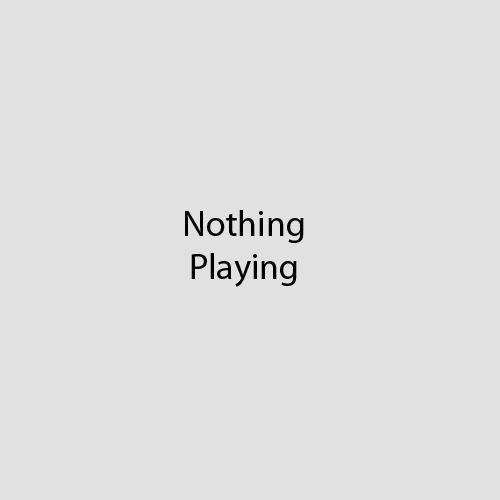
<style>
.page{position:relative;width:500px;height:500px;background:#e1e1e1}
.page>*{position:absolute;margin:0}
.t1{font:36px "MyriadPro-Regular";color:#000000}
</style>
<div class="page">
<p class="t1" style="left:185px;top:210px;width:119px;height:77px;text-align:center">Nothing<br>Playing</p>
</div>
